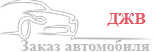
<style>
.page{position:relative;width:153px;height:52px;background:#ffffff}
.page>*{position:absolute;margin:0}
.t1{font:16px "TimesNewRomanPS-BoldMT";color:#e75761}
.t2{font:16px "TimesNewRomanPS-BoldMT";color:#bdbdbd}
</style>
<div class="page">
<p class="t1" style="left:107px;top:13px;width:39px;height:14px">ДЖВ</p>
<p class="t2" style="left:20px;top:39px;width:130px;height:12px">Заказ автомобиля</p>
</div>
